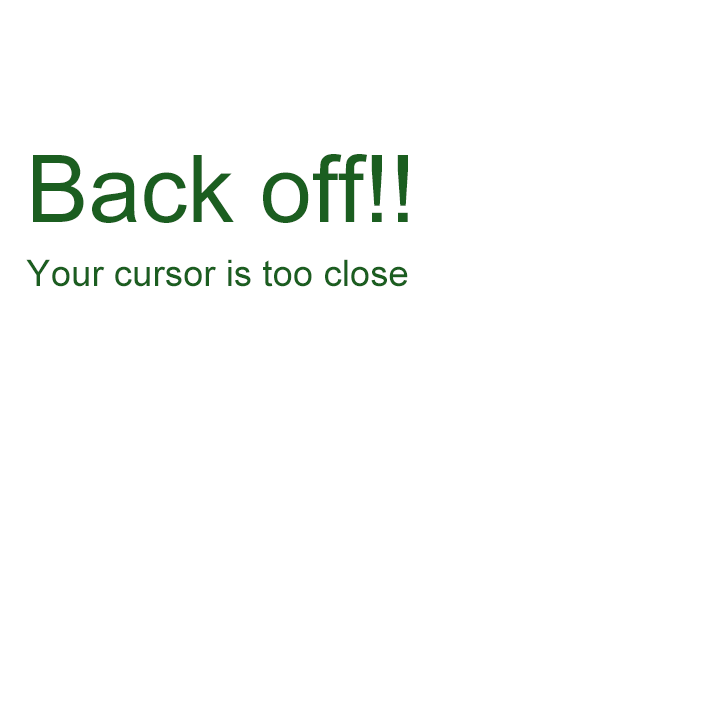
<style>
.page{position:relative;width:720px;height:720px;background:#ffffff}
.page>*{position:absolute;margin:0}
.t1{font:93.5px "ArialMT";color:#1b5e20}
.t2{font:36.6px "ArialMT";color:#1b5e20}
</style>
<div class="page">
<p class="t1" style="left:33px;top:154px;width:375px;height:69px">Back off!!</p>
<p class="t2" style="left:26px;top:259px;width:382px;height:28px">Your cursor is too close</p>
</div>
